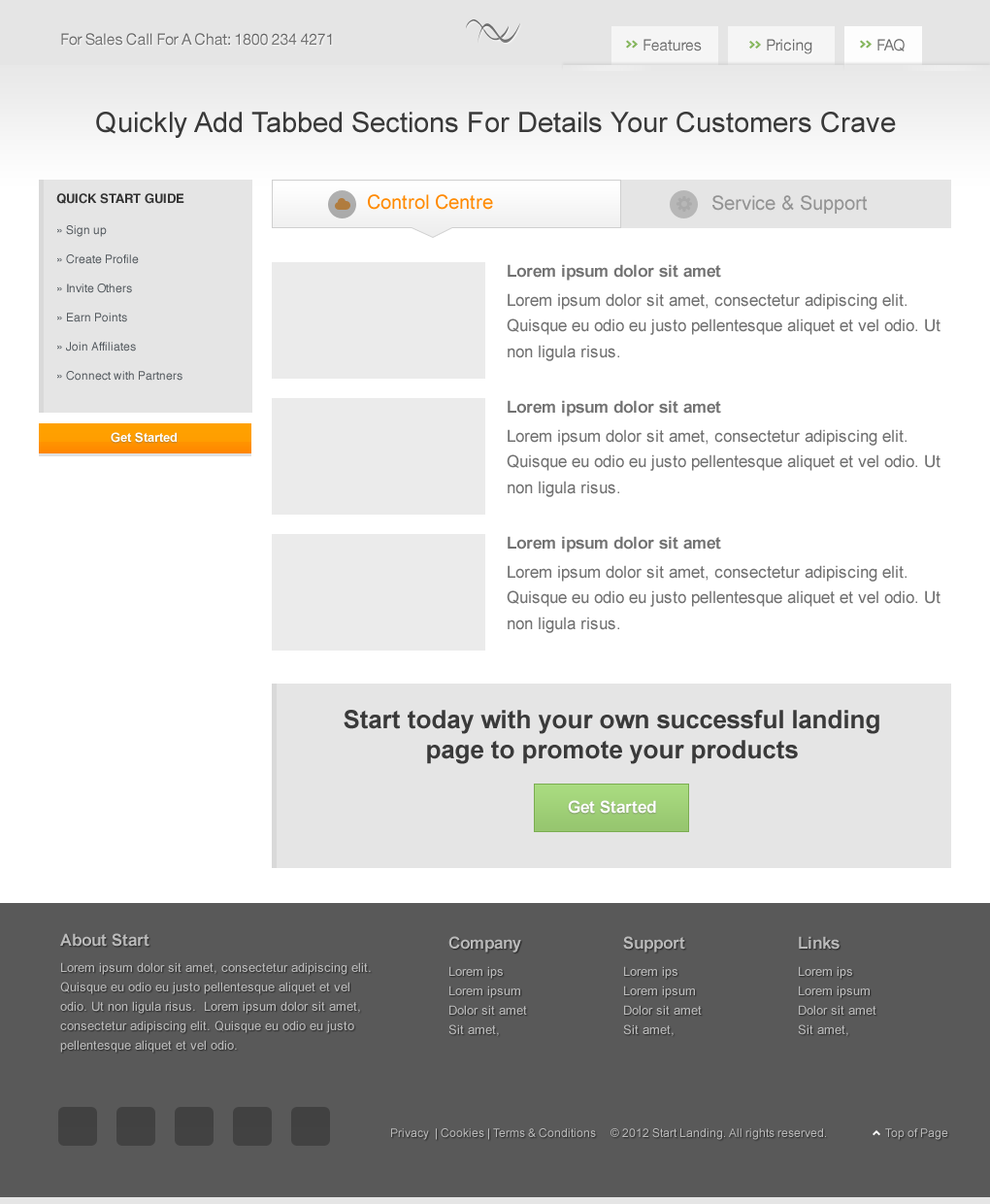
<style>
.page{position:relative;width:990px;height:1204px;background:#ffffff}
.page>*{position:absolute;margin:0}
.t1{font:15.5px "HelveticaNeue-Roman";letter-spacing:-0.02em;color:#717171}
.t2{font:15.5px "HelveticaNeue-Roman";letter-spacing:-0.02em;color:#737373}
.t3{font:15.5px "HelveticaNeue-Roman";letter-spacing:-0.02em;color:#707070}
.t4{font:28.2px "ArialMT";color:#393939}
.t5{font:12.6px "Helvetica-Bold";color:#333333}
.t6{font:19.4px "ArialMT";color:#ff8a00}
.t7{font:19.4px "ArialMT";color:#939393}
.t8{font:11.7px/29.1px "Helvetica";color:#53595e}
.t9{font:16.5px "Arial-BoldMT";color:#717171}
.t10{font:16.5px/25.4px "ArialMT";color:#717171}
.t11{font:12.6px "Arial-BoldMT";color:#fefefe}
.t12{font:25.2px/30.3px "Arial-BoldMT";color:#3a3a3a}
.t13{font:16.5px "Arial-BoldMT";color:#fefefe}
.t14{font:16.5px "Arial-BoldMT";color:#bbbbbb}
.t15{font:16.5px "Arial-BoldMT";color:#bababa}
.t16{font:12.6px/19.4px "ArialMT";color:#bbbbbb}
.t17{font:12.6px "ArialMT";color:#bbbbbb}
.t18{font:11.7px "ArialMT";color:#bbbbbb}
</style>
<div class="page">
<p class="t1" style="left:61px;top:33px;width:271px;height:13px">For Sales Call For A Chat: 1800 234 4271</p>
<p class="t2" style="left:644px;top:39px;width:58px;height:12px">Features</p>
<p class="t3" style="left:767px;top:39px;width:46px;height:15px">Pricing</p>
<p class="t1" style="left:878px;top:39px;width:27px;height:12px">FAQ</p>
<p class="t4" style="left:96px;top:112px;width:800px;height:26px">Quickly Add Tabbed Sections For Details Your Customers Crave</p>
<p class="t5" style="left:56px;top:193px;width:128px;height:11px">QUICK START GUIDE</p>
<p class="t6" style="left:368px;top:194px;width:125px;height:16px">Control Centre</p>
<p class="t7" style="left:713px;top:195px;width:155px;height:19px">Service &amp; Support</p>
<p class="t8" style="left:57px;top:225px;width:126px;height:156px">» Sign up<br>» Create Profile<br>» Invite Others<br>» Earn Points<br>» Join Affiliates<br>» Connect with Partners</p>
<p class="t9" style="left:508px;top:264px;width:213px;height:17px">Lorem ipsum dolor sit amet</p>
<p class="t10" style="left:507px;top:293px;width:434px;height:68px">Lorem ipsum dolor sit amet, consectetur adipiscing elit. Quisque eu odio eu justo pellentesque aliquet et vel odio. Ut non ligula risus.</p>
<p class="t9" style="left:508px;top:400px;width:213px;height:17px">Lorem ipsum dolor sit amet</p>
<p class="t11" style="left:111px;top:432px;width:66px;height:11px">Get Started</p>
<p class="t10" style="left:507px;top:429px;width:434px;height:68px">Lorem ipsum dolor sit amet, consectetur adipiscing elit. Quisque eu odio eu justo pellentesque aliquet et vel odio. Ut non ligula risus.</p>
<p class="t9" style="left:508px;top:536px;width:213px;height:16px">Lorem ipsum dolor sit amet</p>
<p class="t10" style="left:507px;top:565px;width:434px;height:68px">Lorem ipsum dolor sit amet, consectetur adipiscing elit. Quisque eu odio eu justo pellentesque aliquet et vel odio. Ut non ligula risus.</p>
<p class="t12" style="left:344px;top:710px;width:536px;height:54px;text-align:center">Start today with your own successful landing page to promote your products</p>
<p class="t13" style="left:568px;top:800px;width:88px;height:14px">Get Started</p>
<p class="t14" style="left:60px;top:933px;width:90px;height:14px">About Start</p>
<p class="t15" style="left:449px;top:936px;width:72px;height:17px">Company</p>
<p class="t15" style="left:623px;top:936px;width:63px;height:17px">Support</p>
<p class="t15" style="left:799px;top:936px;width:41px;height:14px">Links</p>
<p class="t16" style="left:60px;top:962px;width:311px;height:91px">Lorem ipsum dolor sit amet, consectetur adipiscing elit. Quisque eu odio eu justo pellentesque aliquet et vel odio. Ut non ligula risus.  Lorem ipsum dolor sit amet, consectetur adipiscing elit. Quisque eu odio eu justo pellentesque aliquet et vel odio.</p>
<p class="t17" style="left:450px;top:966px;width:53px;height:13px">Lorem ips</p>
<p class="t17" style="left:624px;top:966px;width:54px;height:13px">Lorem ips</p>
<p class="t17" style="left:799px;top:966px;width:54px;height:13px">Lorem ips</p>
<p class="t17" style="left:450px;top:986px;width:70px;height:12px">Lorem ipsum</p>
<p class="t17" style="left:624px;top:986px;width:71px;height:12px">Lorem ipsum</p>
<p class="t17" style="left:799px;top:986px;width:71px;height:12px">Lorem ipsum</p>
<p class="t17" style="left:450px;top:1005px;width:77px;height:10px">Dolor sit amet</p>
<p class="t17" style="left:624px;top:1005px;width:78px;height:10px">Dolor sit amet</p>
<p class="t17" style="left:799px;top:1005px;width:78px;height:10px">Dolor sit amet</p>
<p class="t17" style="left:449px;top:1024px;width:50px;height:12px">Sit amet,</p>
<p class="t17" style="left:623px;top:1024px;width:51px;height:12px">Sit amet,</p>
<p class="t17" style="left:798px;top:1024px;width:51px;height:12px">Sit amet,</p>
<p class="t18" style="left:391px;top:1128px;width:435px;height:12px">Privacy  | Cookies | Terms &amp; Conditions  © 2012 Start Landing. All rights reserved.</p>
<p class="t18" style="left:886px;top:1128px;width:63px;height:12px">Top of Page</p>
</div>
